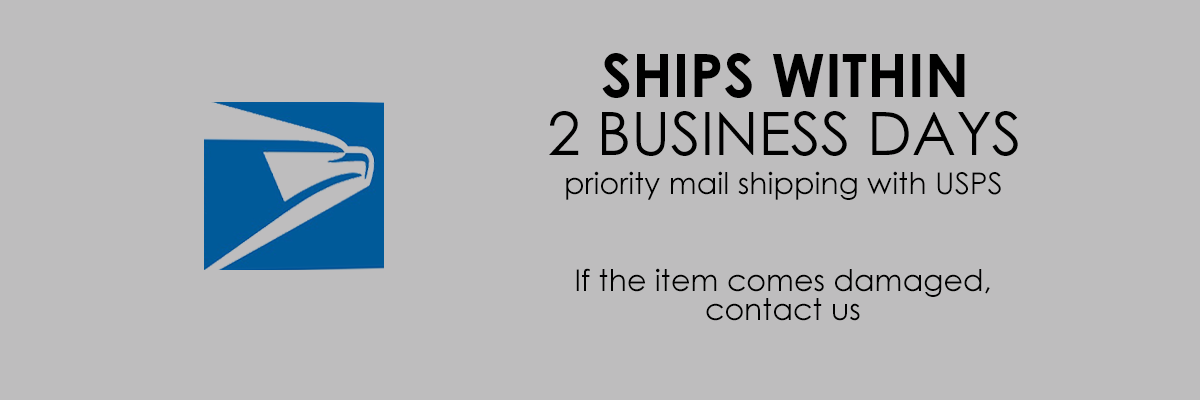
<style>
.page{position:relative;width:1200px;height:400px;background:#bebdbe}
.page>*{position:absolute;margin:0}
.t1{font:60px "CenturyGothic-Bold";color:#000000}
.t2{font:60px "CenturyGothic";color:#000000}
.t3{font:30px "CenturyGothic";color:#000000}
</style>
<div class="page">
<p class="t1" style="left:602px;top:53px;width:363px;height:45px">SHIPS WITHIN</p>
<p class="t2" style="left:549px;top:111px;width:469px;height:45px">2 BUSINESS DAYS</p>
<p class="t3" style="left:566px;top:171px;width:435px;height:29px">priority mail shipping with USPS</p>
<p class="t3" style="left:576px;top:268px;width:414px;height:29px">If the item comes damaged,</p>
<p class="t3" style="left:706px;top:298px;width:154px;height:23px">contact us</p>
</div>
